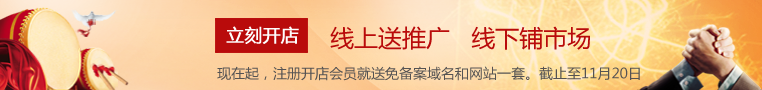
<style>
.page{position:relative;width:762px;height:90px}
.page>*{position:absolute;margin:0}
.t1{font:17.6px "MicrosoftYaHei";color:#fefdfd;font-weight:bold}
.t2{font:23.7px "MicrosoftYaHei";color:#b90b0b}
.t3{font:13.8px "MicrosoftYaHei";color:#555353}
</style>
<div class="page">
<p class="t1" style="left:226px;top:26px;width:73px;height:18px">立刻开店</p>
<p class="t2" style="left:330px;top:26px;width:260px;height:24px">线上送推广   线下铺市场</p>
<p class="t3" style="left:217px;top:66px;width:423px;height:15px">现在起，注册开店会员就送免备案域名和网站一套。截止至11月20日</p>
</div>
